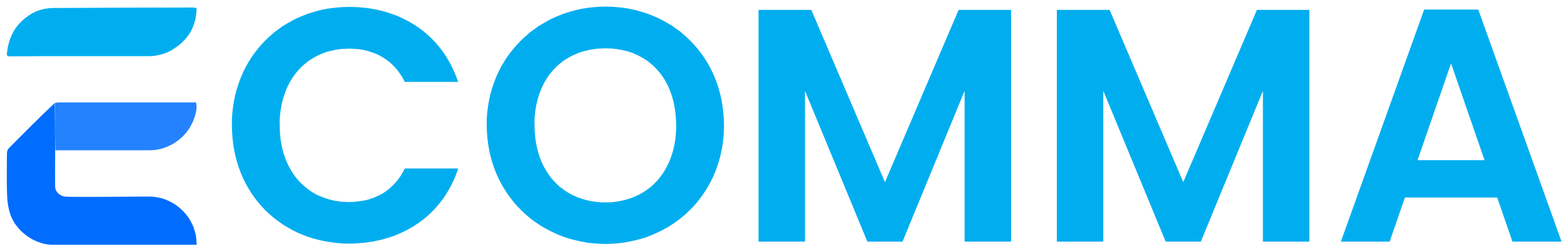
<style>
.page{position:relative;width:1568px;height:251px;background:#ffffff}
.page>*{position:absolute;margin:0}
.t1{font:331.8px "Poppins-SemiBold";color:#00aeef}
</style>
<div class="page">
<p class="t1" style="left:231px;top:6px;width:1331px;height:238px">COMMA</p>
</div>
